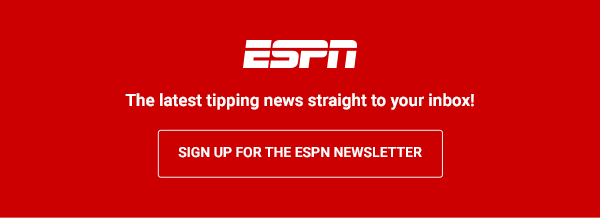
<style>
.page{position:relative;width:600px;height:218px;background:#cc0000}
.page>*{position:absolute;margin:0}
.t1{font:17px "Roboto-Bold";color:#ffffff}
.t2{font:14px "Roboto-Bold";color:#ffffff;text-transform:uppercase}
</style>
<div class="page">
<p class="t1" style="left:125px;top:93px;width:349px;height:17px">The latest tipping news straight to your inbox!</p>
<p class="t2" style="left:178px;top:147px;width:244px;height:11px">SIGN UP FOR THE ESPN NEWSLETTER</p>
</div>
